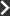
<style>
.page{position:relative;width:10px;height:16px;background:#333333}
.page>*{position:absolute;margin:0}
.t1{font:35.5px "GearedSlab-Thin";color:#ffffff}
</style>
<div class="page">
<p class="t1" style="left:0px;top:0px;width:10px;height:16px">&gt;</p>
</div>
